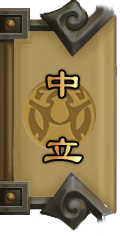
<style>
.page{position:relative;width:120px;height:236px}
.page>*{position:absolute;margin:0}
.t1{font:40px/72px "LiSu";letter-spacing:-0.115em}
</style>
<div class="page">
<p class="t1" style="left:44px;top:71px;width:38px;height:91px">中  立</p>
</div>
